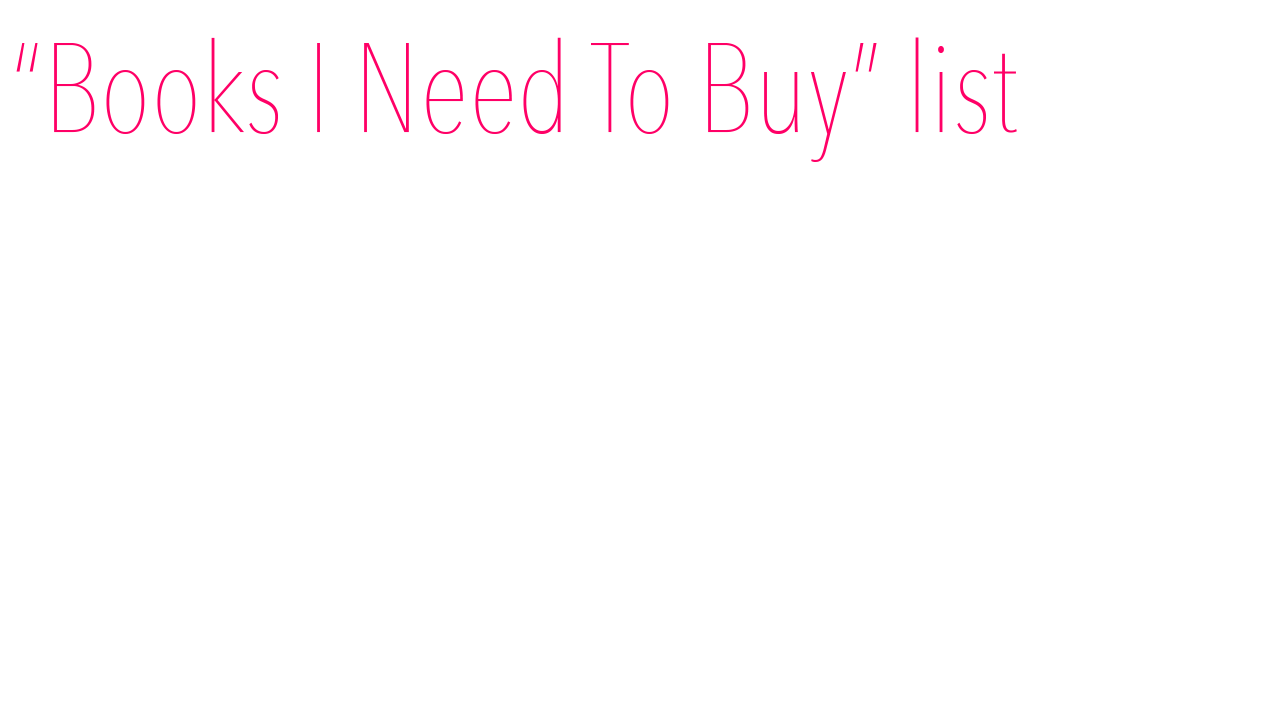
<style>
.page{position:relative;width:1280px;height:720px;background:#ffffff}
.page>*{position:absolute;margin:0}
.t1{font:125px "AvenirNextCondensed-UltraLight";color:#ff0066}
</style>
<div class="page">
<p class="t1" style="left:16px;top:37px;width:1001px;height:125px">“Books I Need To Buy” list</p>
</div>
